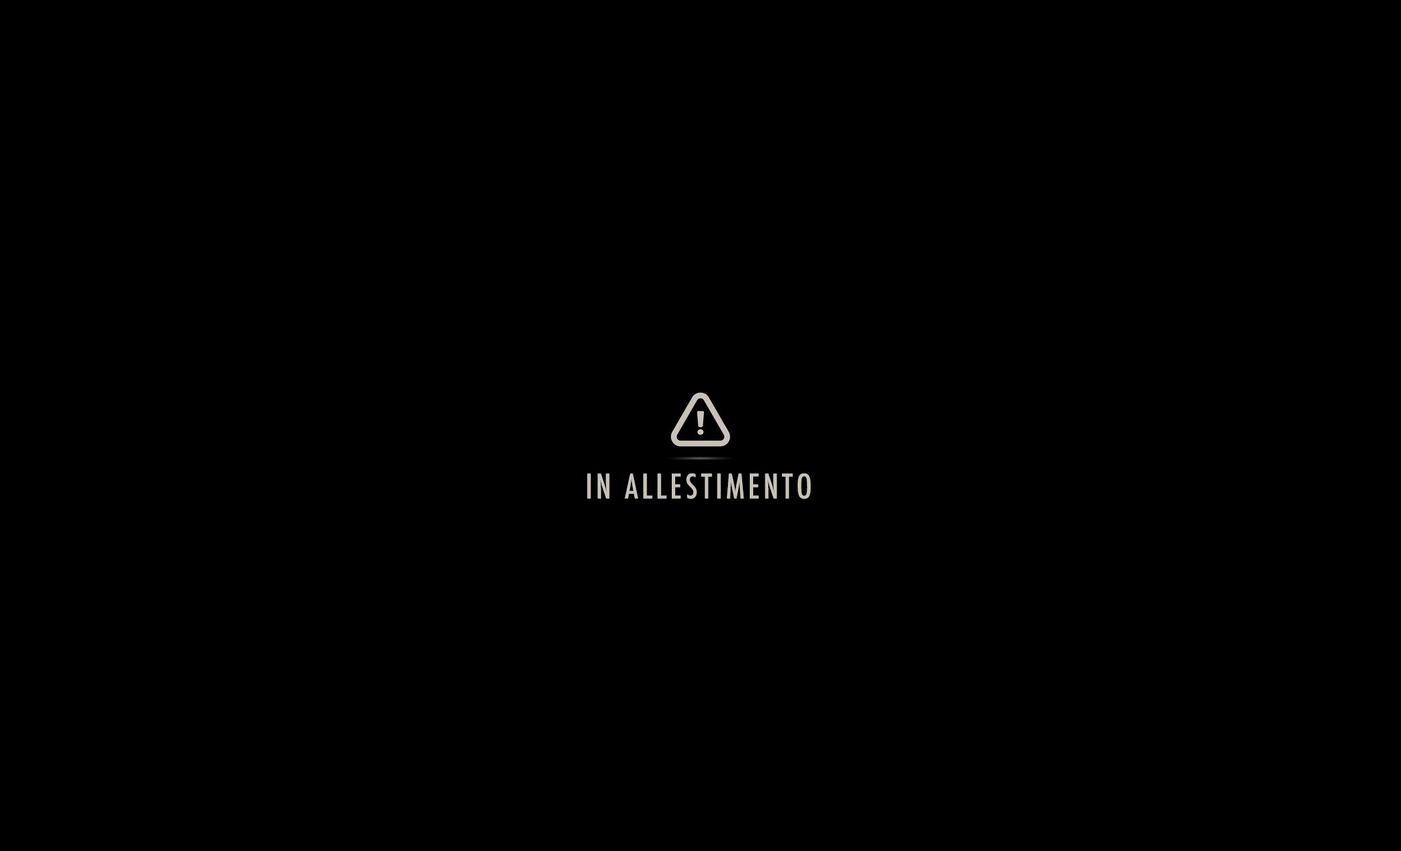
<style>
.page{position:relative;width:1401px;height:851px;background:#000000}
.page>*{position:absolute;margin:0}
.t1{font:33px "Futura-CondensedMedium";letter-spacing:0.1em;color:#c7c1b8;text-transform:uppercase}
</style>
<div class="page">
<p class="t1" style="left:587px;top:473px;width:224px;height:26px">IN ALLESTIMENTO</p>
</div>
